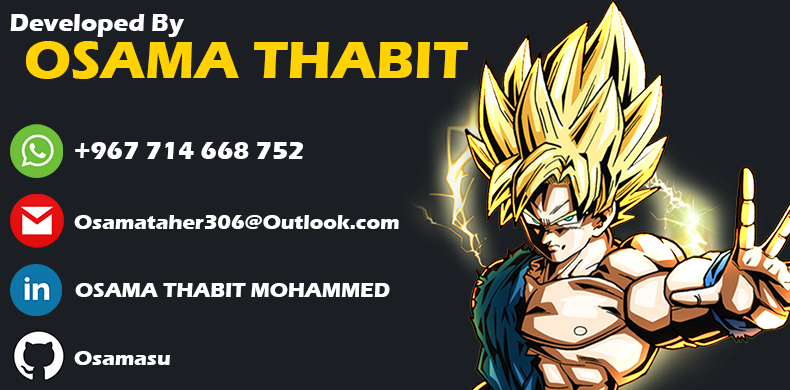
<style>
.page{position:relative;width:790px;height:390px;background:#1b1f23}
.page>*{position:absolute;margin:0}
.t1{font:25px "ErasITC-Bold";color:#ffffff}
.t2{font:54.2px "ErasITC-Bold";color:#ffd200}
.t3{font:20.8px "ErasITC-Bold";color:#ffffff}
</style>
<div class="page">
<p class="t1" style="left:10px;top:14px;width:174px;height:23px">Developed By</p>
<p class="t2" style="left:26px;top:41px;width:442px;height:38px">OSAMA THABIT</p>
<p class="t1" style="left:75px;top:142px;width:228px;height:17px">+967 714 668 752</p>
<p class="t3" style="left:74px;top:215px;width:325px;height:14px">Osamataher306@Outlook.com</p>
<p class="t3" style="left:75px;top:283px;width:315px;height:14px">OSAMA THABIT MOHAMMED</p>
<p class="t3" style="left:74px;top:351px;width:96px;height:14px">Osamasu</p>
</div>
